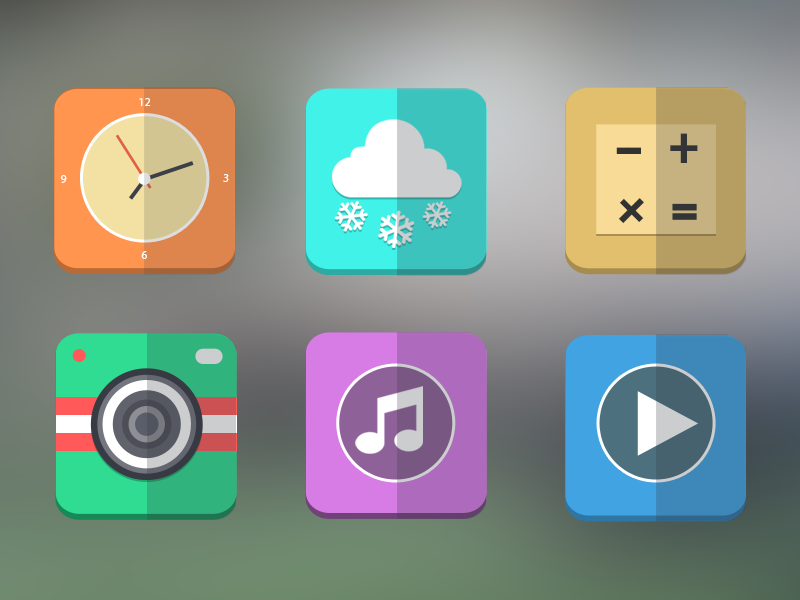
<style>
.page{position:relative;width:800px;height:600px}
.page>*{position:absolute;margin:0}
.t1{font:11.9px "MyriadPro-Regular";color:#ffffff}
.t2{font:61.2px "ProximaNova-Extrabld";color:#323232}
.t3{font:51px "ProximaNova-Extrabld";color:#323232}
</style>
<div class="page">
<p class="t1" style="left:139px;top:98px;width:12px;height:8px">12</p>
<p class="t2" style="left:670px;top:133px;width:28px;height:30px">+</p>
<p class="t3" style="left:616px;top:147px;width:13px;height:7px">-</p>
<p class="t3" style="left:628px;top:147px;width:13px;height:7px">-</p>
<p class="t1" style="left:223px;top:174px;width:6px;height:8px">3</p>
<p class="t1" style="left:61px;top:175px;width:6px;height:8px">9</p>
<p class="t2" style="left:618px;top:198px;width:26px;height:26px;rotate:45deg">+</p>
<p class="t1" style="left:141px;top:251px;width:6px;height:8px">6</p>
</div>
